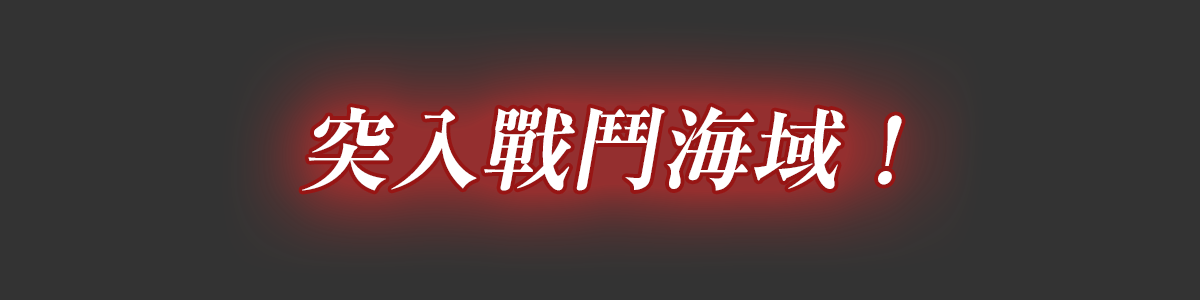
<style>
.page{position:relative;width:1200px;height:300px;background:#333333}
.page>*{position:absolute;margin:0}
.t1{font:90px "RyuminPr6N-ExBold";color:#ffffff;font-style:italic}
</style>
<div class="page">
<p class="t1" style="left:302px;top:106px;width:600px;height:85px">突入戰鬥海域！</p>
</div>
